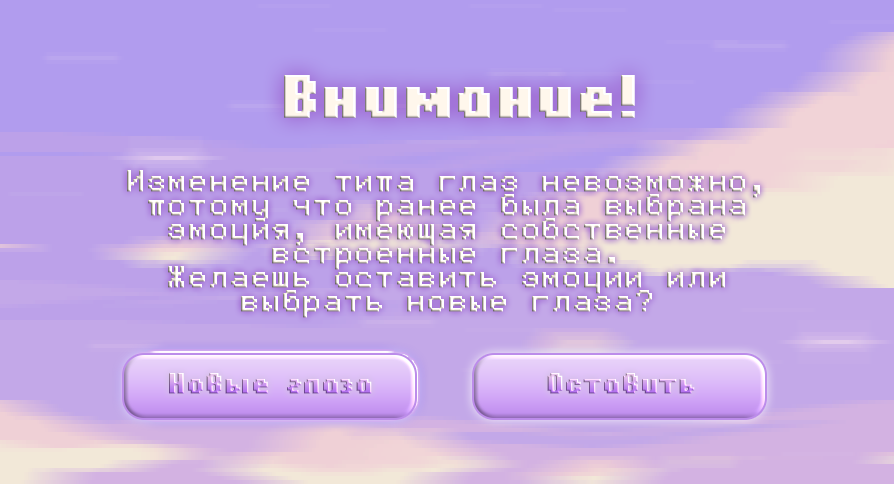
<style>
.page{position:relative;width:894px;height:484px}
.page>*{position:absolute;margin:0}
.t1{font:60px "Hardpixel";letter-spacing:0.05em;color:#ffffff;font-weight:bold}
.t2{font:36px/24px "Fifaks1.0dev1";letter-spacing:0.05em;font-weight:bold}
.t3{font:28.4px "Hardpixel";letter-spacing:0.05em;font-weight:bold}
</style>
<div class="page">
<p class="t1" style="left:284px;top:75px;width:351px;height:43px">Внимание!</p>
<p class="t2" style="left:127px;top:170px;width:633px;height:148px;text-align:center">Изменение типа глаз невозможно,<br>потому что ранее была выбрана<br>эмоция, имеющая собственные<br>встроенные глаза.<br>Желаешь оставить эмоции или<br>выбрать новые глаза?</p>
<p class="t3" style="left:169px;top:373px;width:203px;height:21px">Новые глаза</p>
<p class="t3" style="left:547px;top:373px;width:148px;height:21px">Оставить</p>
</div>
